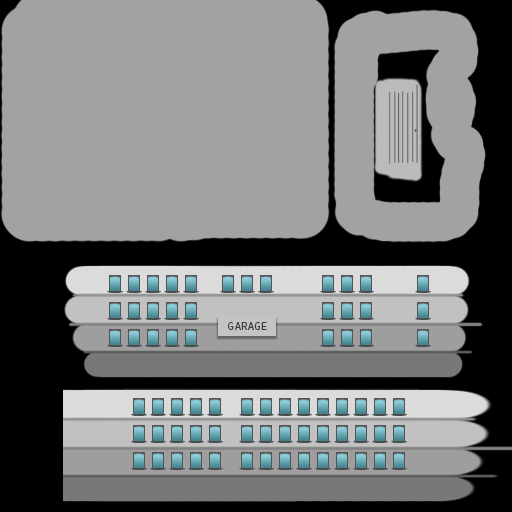
<style>
.page{position:relative;width:512px;height:512px;background:#a2a2a2}
.page>*{position:absolute;margin:0}
.t1{font:11px "SourceCodePro-Regular";color:#3e3e3e}
</style>
<div class="page">
<p class="t1" style="left:228px;top:322px;width:39px;height:8px">GARAGE</p>
</div>
